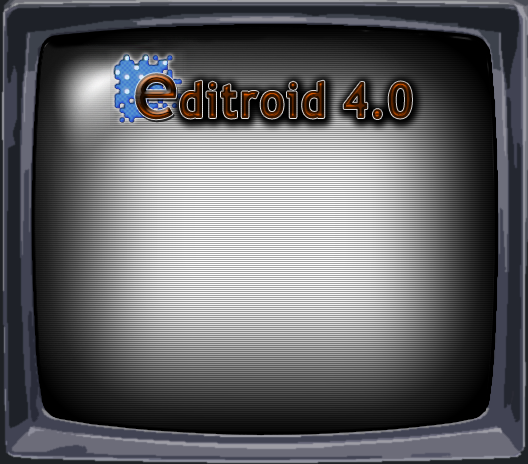
<style>
.page{position:relative;width:528px;height:464px}
.page>*{position:absolute;margin:0}
.t1{font:80px "TrebuchetMS";letter-spacing:0.025em;font-weight:bold}
.t2{font:47.8px "TrebuchetMS-Bold";letter-spacing:0.025em;font-weight:bold;scale:0.89 1}
</style>
<div class="page">
<p class="t1" style="left:135px;top:73px;width:42px;height:47px">e</p>
<p class="t2" style="left:180px;top:80px;width:232px;height:39px">ditroid 4.0</p>
</div>
